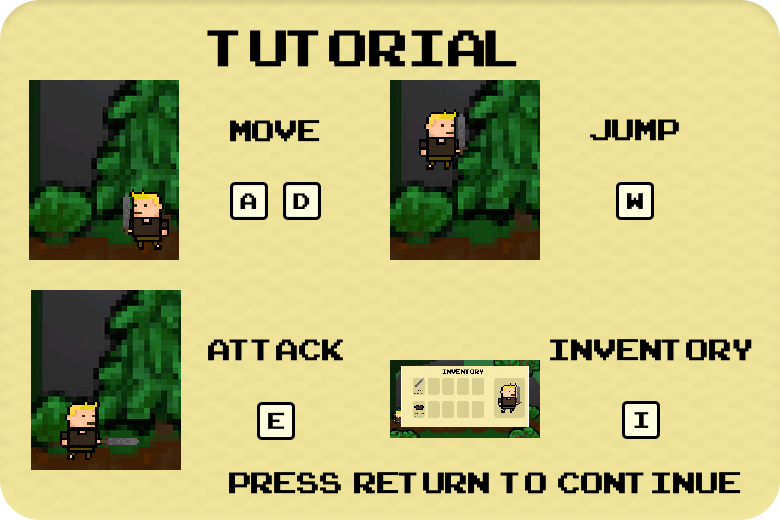
<style>
.page{position:relative;width:780px;height:520px}
.page>*{position:absolute;margin:0}
.t1{font:72px "ArcadeClassic";color:#000000}
.t2{font:41.7px "ArcadeClassic";color:#000000}
.t3{font:31.3px "ArcadeClassic";color:#000000}
.t4{font:31.7px "ArcadeClassic";color:#000000}
</style>
<div class="page">
<p class="t1" style="left:207px;top:30px;width:310px;height:37px">Tutorial</p>
<p class="t2" style="left:230px;top:120px;width:90px;height:22px">Move</p>
<p class="t2" style="left:590px;top:119px;width:89px;height:22px">Jump</p>
<p class="t3" style="left:240px;top:193px;width:17px;height:16px">A</p>
<p class="t3" style="left:293px;top:193px;width:17px;height:16px">D</p>
<p class="t4" style="left:627px;top:193px;width:16px;height:16px">W</p>
<p class="t2" style="left:208px;top:339px;width:135px;height:22px">Attack</p>
<p class="t2" style="left:550px;top:339px;width:202px;height:22px">Inventory</p>
<p class="t4" style="left:268px;top:412px;width:17px;height:17px">E</p>
<p class="t4" style="left:634px;top:412px;width:15px;height:16px">I</p>
<p class="t2" style="left:229px;top:472px;width:512px;height:22px">Press  Return  to  continue</p>
</div>
